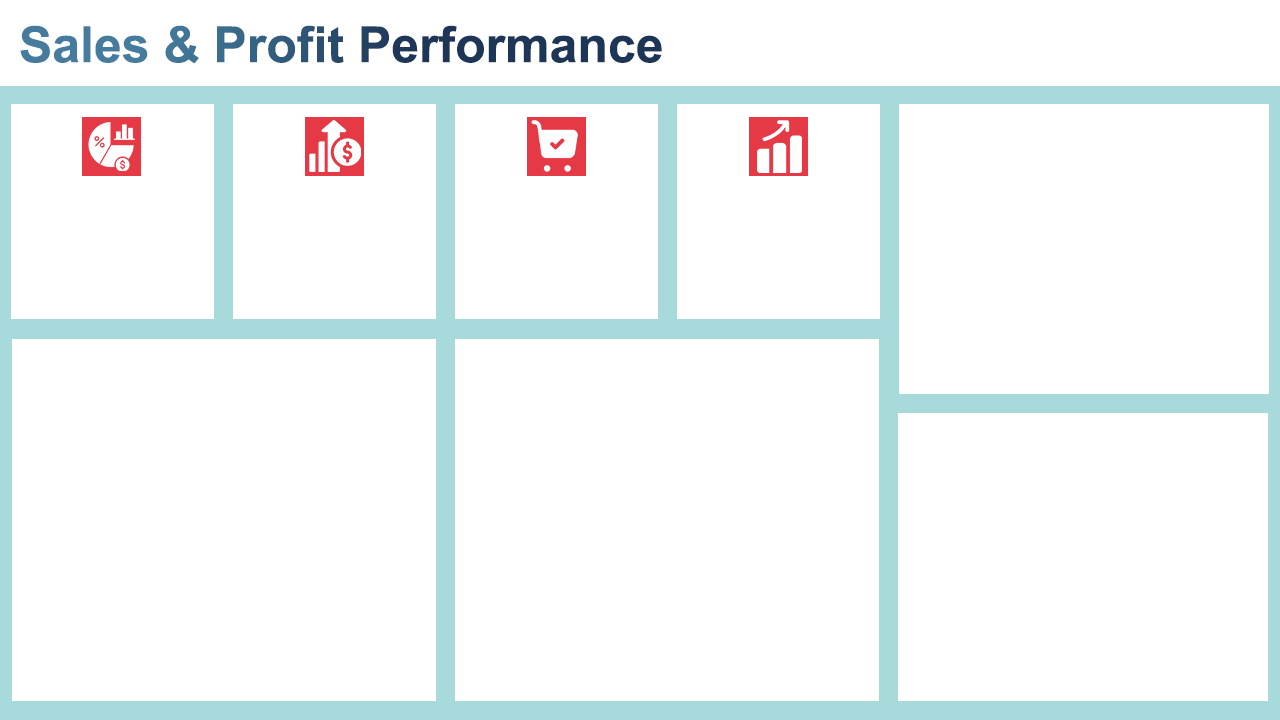
<style>
.page{position:relative;width:1280px;height:720px;background:#ffffff}
.page>*{position:absolute;margin:0}
.t1{font:50px "Arial-BoldMT"}
</style>
<div class="page">
<p class="t1" style="left:20px;top:25px;width:642px;height:39px">Sales &amp; Profit Performance</p>
</div>
